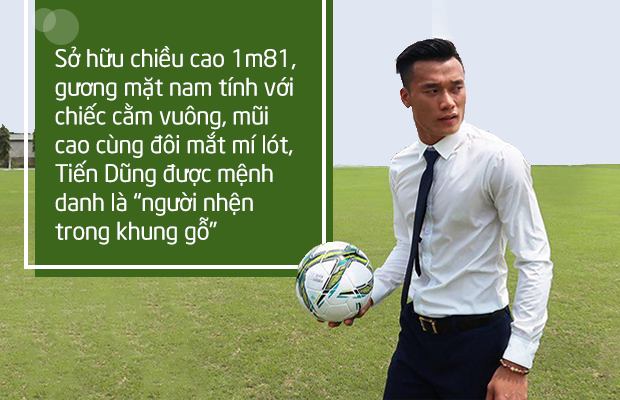
<style>
.page{position:relative;width:620px;height:400px;background:#3c661c}
.page>*{position:absolute;margin:0}
.t1{font:24px "UTM-Neo-Sans-Intel";color:#ffffff}
</style>
<div class="page">
<p class="t1" style="left:55px;top:46px;width:241px;height:199px">Sở hữu chiều cao 1m81,<br>gương mặt nam tính với<br>chiếc cằm vuông, mũi<br>cao cùng đôi mắt mí lót,<br>Tiến Dũng được mệnh<br>danh là “người nhện<br>trong khung gỗ”</p>
</div>
